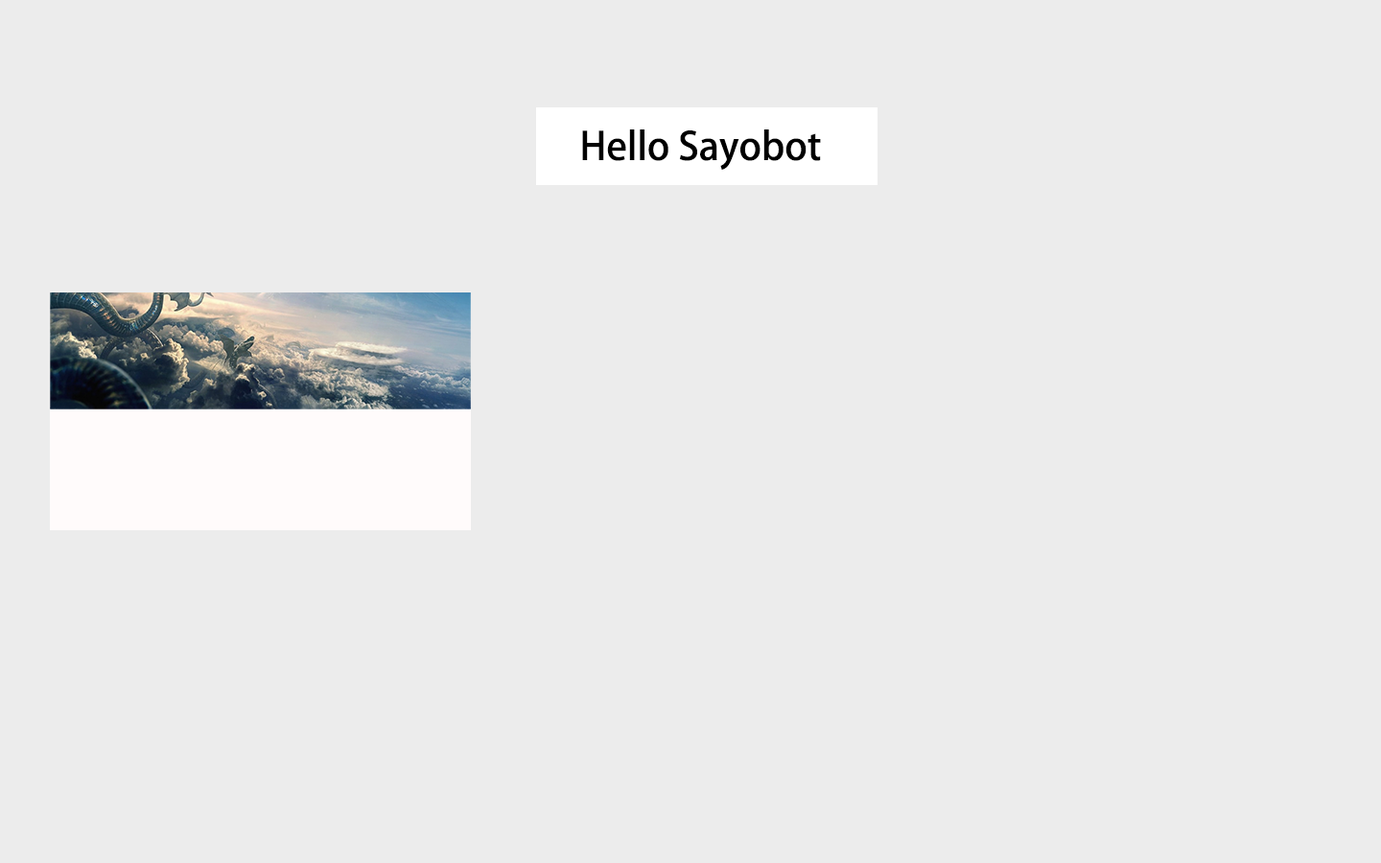
<style>
.page{position:relative;width:1381px;height:863px;background:#ececec}
.page>*{position:absolute;margin:0}
.t1{font:38.2px "AdobeHeitiStd-Regular";color:#000000}
</style>
<div class="page">
<p class="t1" style="left:582px;top:129px;width:239px;height:41px">Hello Sayobot</p>
</div>
